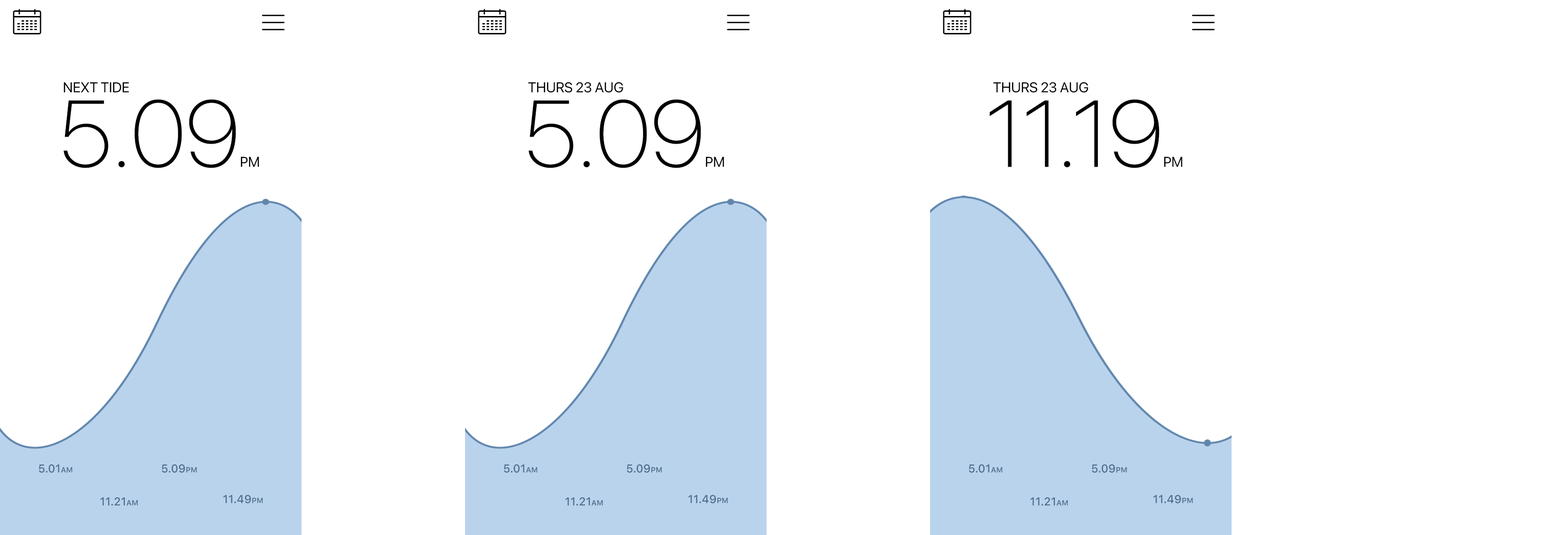
<style>
.page{position:relative;width:1568px;height:535px;background:#ffffff}
.page>*{position:absolute;margin:0}
.t1{font:14.1px "SFProDisplay-Regular";color:#000000;text-transform:uppercase}
.t2{font:94.2px "SFProDisplay-Thin";color:#000000}
.t3{font:11.3px "SFProText-Medium";color:#506e8d;text-transform:uppercase}
.t4{font:7.5px "SFProText-Semibold";color:#506e8d;text-transform:uppercase}
</style>
<div class="page">
<p class="t1" style="left:64px;top:82px;width:65px;height:10px">Next tide</p>
<p class="t1" style="left:528px;top:82px;width:95px;height:11px">Thurs 23 Aug</p>
<p class="t1" style="left:993px;top:82px;width:95px;height:11px">Thurs 23 Aug</p>
<p class="t2" style="left:64px;top:99px;width:195px;height:69px">5.09<span class="t1">pm</span></p>
<p class="t2" style="left:529px;top:99px;width:195px;height:69px">5.09<span class="t1">pm</span></p>
<p class="t2" style="left:989px;top:99px;width:194px;height:69px">11.19<span class="t1">pm</span></p>
<p class="t3" style="left:39px;top:465px;width:34px;height:8px">5.01<span class="t4">am</span></p>
<p class="t3" style="left:162px;top:465px;width:35px;height:8px">5.09<span class="t4">pm</span></p>
<p class="t3" style="left:504px;top:465px;width:34px;height:8px">5.01<span class="t4">am</span></p>
<p class="t3" style="left:627px;top:465px;width:35px;height:8px">5.09<span class="t4">pm</span></p>
<p class="t3" style="left:969px;top:465px;width:34px;height:8px">5.01<span class="t4">am</span></p>
<p class="t3" style="left:1092px;top:465px;width:35px;height:8px">5.09<span class="t4">pm</span></p>
<p class="t3" style="left:100px;top:498px;width:38px;height:8px">11.21<span class="t4">am</span></p>
<p class="t3" style="left:223px;top:495px;width:40px;height:9px">11.49<span class="t4">pm</span></p>
<p class="t3" style="left:565px;top:498px;width:38px;height:8px">11.21<span class="t4">am</span></p>
<p class="t3" style="left:688px;top:495px;width:40px;height:9px">11.49<span class="t4">pm</span></p>
<p class="t3" style="left:1030px;top:498px;width:38px;height:8px">11.21<span class="t4">am</span></p>
<p class="t3" style="left:1153px;top:495px;width:40px;height:9px">11.49<span class="t4">pm</span></p>
</div>
